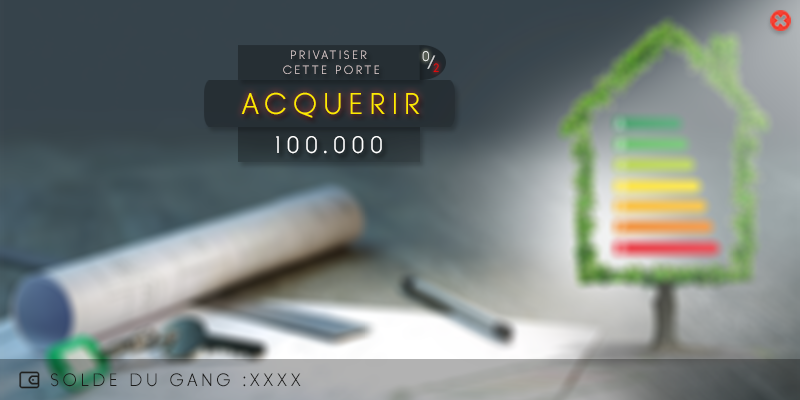
<style>
.page{position:relative;width:800px;height:400px}
.page>*{position:absolute;margin:0}
.t1{font:12px/14px "BanksMilesSingleLine";letter-spacing:0.2em;color:#dbcccc}
.t2{font:14px "BanksMilesSingleLine";letter-spacing:0.2em}
.t3{font:18.1px "BanksMilesSingleLine";letter-spacing:0.2em;color:#d0d0d1;scale:1.68 1}
.t4{font:12px "BanksMilesSingleLine";letter-spacing:0.2em}
.t5{font:30px "BanksMilesSingleLine";letter-spacing:0.2em;color:#ffea00}
.t6{font:24px "BanksMilesSingleLine";letter-spacing:0.2em;color:#ffffff}
.t7{font:18px "BanksMilesSingleLine";letter-spacing:0.2em;color:#1b1b19}
</style>
<div class="page">
<p class="t1" style="left:283px;top:50px;width:96px;height:24px;text-align:center">PRIVATISER <br>CETTE PORTE</p>
<p class="t2" style="left:422px;top:51px;width:7px;height:11px">0</p>
<p class="t3" style="left:427px;top:55px;width:9px;height:14px;rotate:7deg">/</p>
<p class="t4" style="left:433px;top:63px;width:6px;height:9px">2</p>
<p class="t5" style="left:241px;top:92px;width:179px;height:26px">ACQUERIR</p>
<p class="t6" style="left:276px;top:136px;width:106px;height:18px">100.000</p>
<p class="t7" style="left:51px;top:373px;width:250px;height:14px">SOLDE DU GANG :XXXX</p>
</div>
